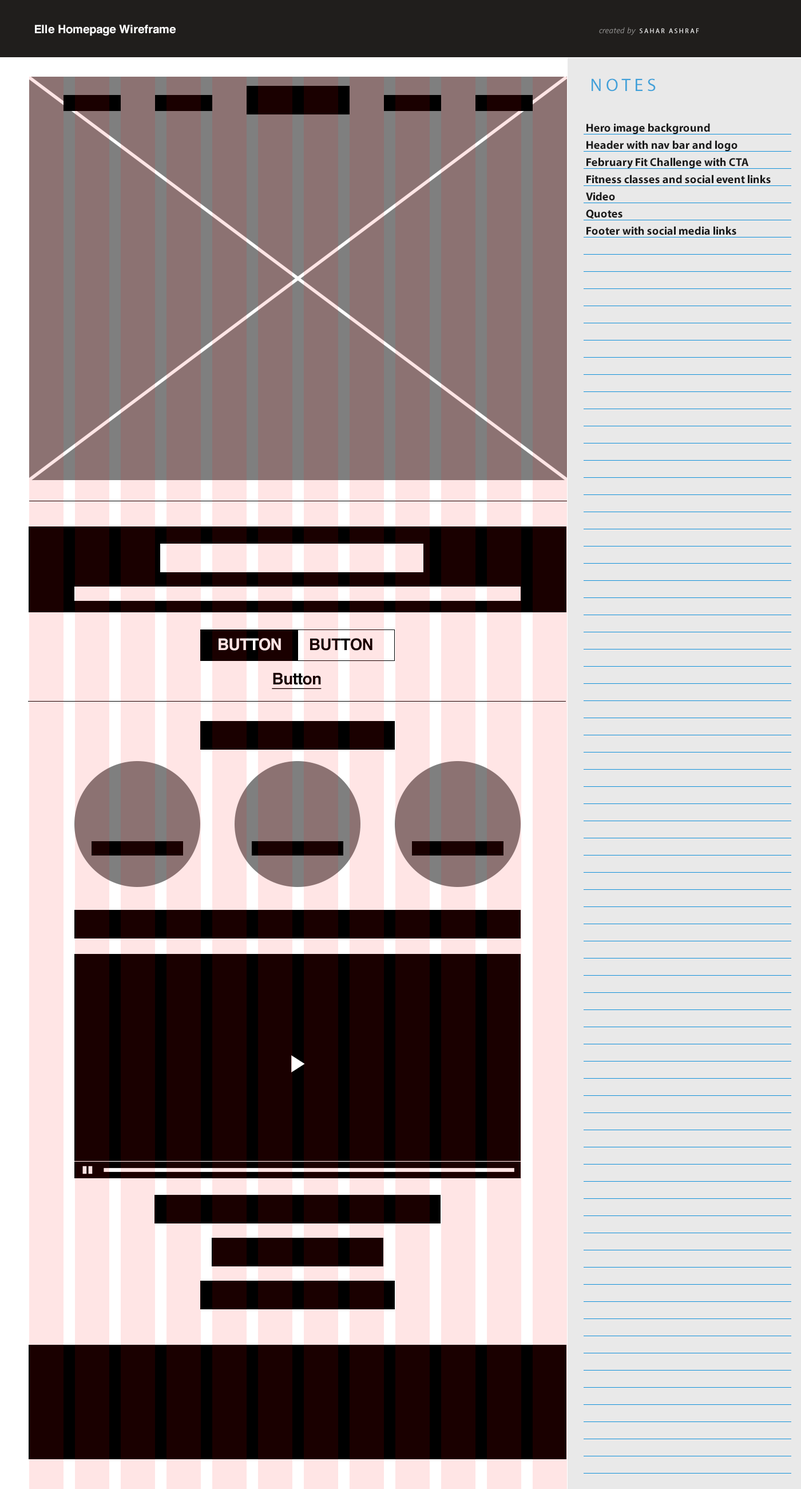
<style>
.page{position:relative;width:801px;height:1489px;background:#e9e9e9}
.page>*{position:absolute;margin:0}
.t1{font:11.4px "Helvetica-Bold";color:#ffffff}
.t2{font:8px "SegoeUI-Italic";color:#908f8e}
.t3{font:6.9px "MyriadPro-Regular";letter-spacing:0.2em;color:#ffffff;text-transform:uppercase}
.t4{font:18.1px "MyriadPro-Regular";letter-spacing:0.2em;color:#41a1d9;text-transform:uppercase}
.t5{font:11.4px/17.2px "MyriadPro-Bold";color:#1b1b1b}
.t6{font:16px "Helvetica-Bold";letter-spacing:-0.025em;color:#ffe5e5}
.t7{font:16px "Helvetica-Bold";letter-spacing:-0.025em;color:#1a0000}
.t8{font:16px "Helvetica-Bold";letter-spacing:-0.025em;color:#1a0000;text-decoration:underline}
</style>
<div class="page">
<p class="t1" style="left:35px;top:25px;width:141px;height:11px">Elle Homepage Wireframe</p>
<p class="t2" style="left:599px;top:27px;width:37px;height:8px">created by</p>
<p class="t3" style="left:640px;top:28px;width:59px;height:5px">Sahar Ashraf</p>
<p class="t4" style="left:592px;top:78px;width:64px;height:14px">NOTES</p>
<p class="t5" style="left:586px;top:123px;width:185px;height:112px">Hero image background<br>Header with nav bar and logo<br>February Fit Challenge with CTA<br>Fitness classes and social event links<br>Video<br>Quotes<br>Footer with social media links</p>
<p class="t6" style="left:219px;top:638px;width:62px;height:13px">BUTTON</p>
<p class="t7" style="left:310px;top:638px;width:62px;height:13px">BUTTON</p>
<p class="t8" style="left:272px;top:672px;width:50px;height:17px">Button</p>
</div>
